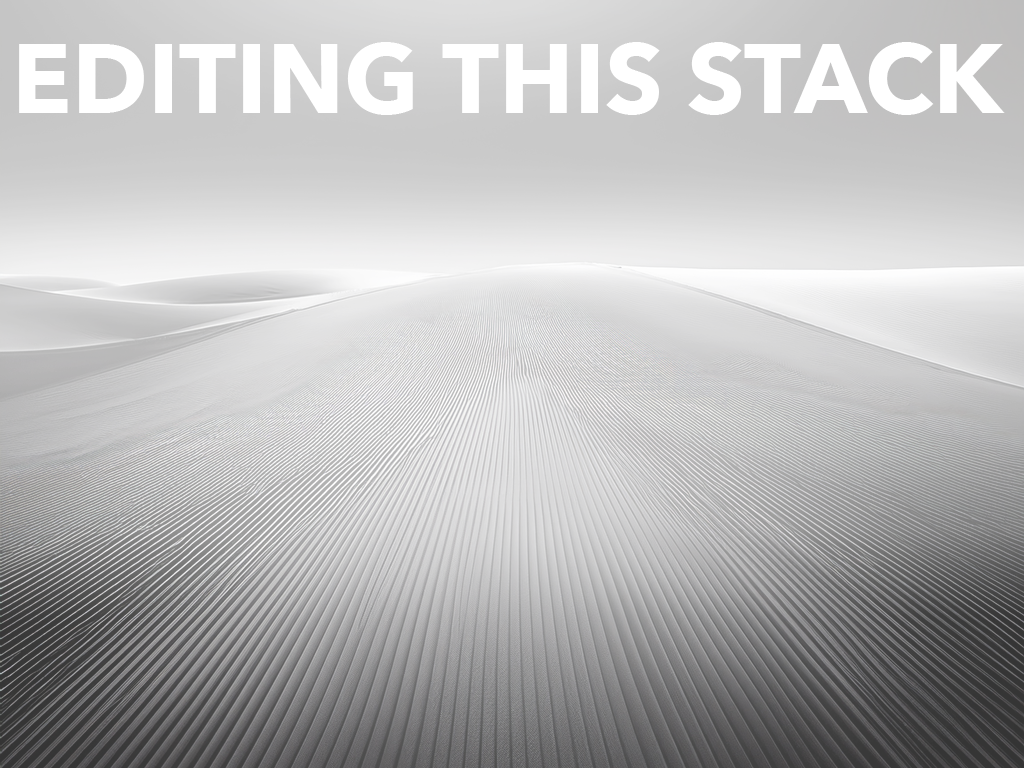
<style>
.page{position:relative;width:1024px;height:768px}
.page>*{position:absolute;margin:0}
.t1{font:98px "AvenirNext-Bold";color:#ffffff}
</style>
<div class="page">
<p class="t1" style="left:19px;top:42px;width:986px;height:73px">EDITING THIS STACK</p>
</div>
